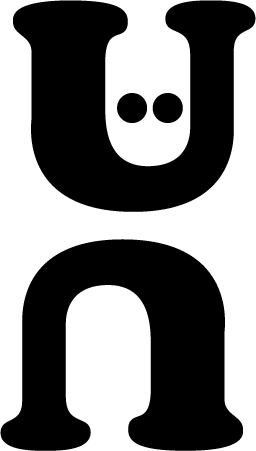
<style>
.page{position:relative;width:256px;height:451px;background:#000000}
.page>*{position:absolute;margin:0}
.t1{font:288px "CooperBlackStd";color:#000000;font-variant:small-caps;font-weight:bold}
.t2{font:120px "CooperBlackStd";color:#000000;font-variant:small-caps;font-weight:bold}
</style>
<div class="page">
<p class="t1" style="left:13px;top:0px;width:243px;height:212px">U</p>
<p class="t2" style="left:117px;top:93px;width:66px;height:30px;rotate:-90deg">:</p>
<p class="t1" style="left:0px;top:239px;width:243px;height:212px;rotate:180deg">U</p>
</div>
